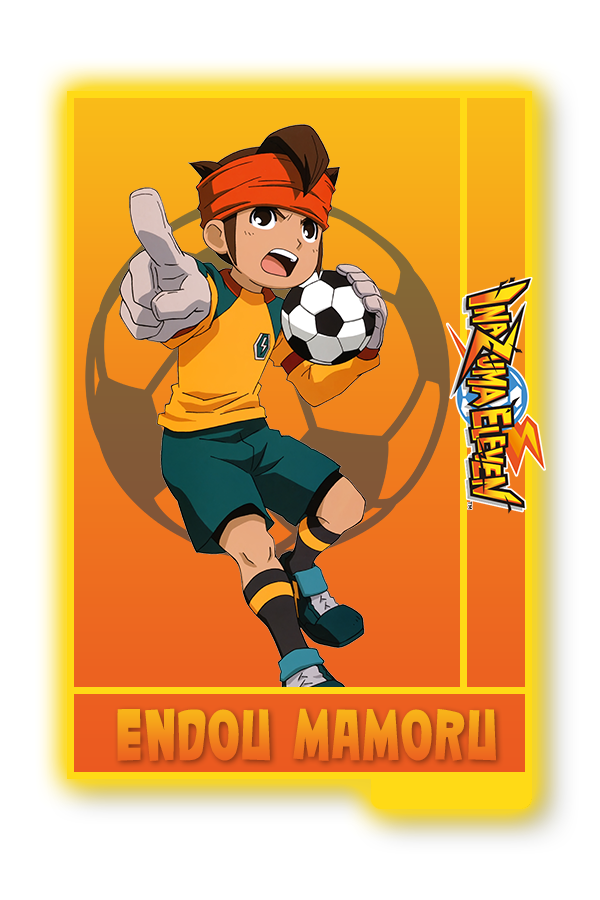
<style>
.page{position:relative;width:600px;height:900px;background:#ffffff}
.page>*{position:absolute;margin:0}
.t1{font:75px "TTG-Bold"}
</style>
<div class="page">
<p class="t1" style="left:117px;top:708px;width:379px;height:53px">Endou Mamoru</p>
</div>
